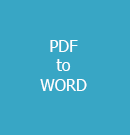
<style>
.page{position:relative;width:130px;height:135px;background:#38a6c5}
.page>*{position:absolute;margin:0}
.t1{font:12px "Tahoma";color:#ffffff}
</style>
<div class="page">
<p class="t1" style="left:40px;top:40px;width:47px;height:51px;text-align:center">PDF<br>to<br>WORD</p>
</div>
